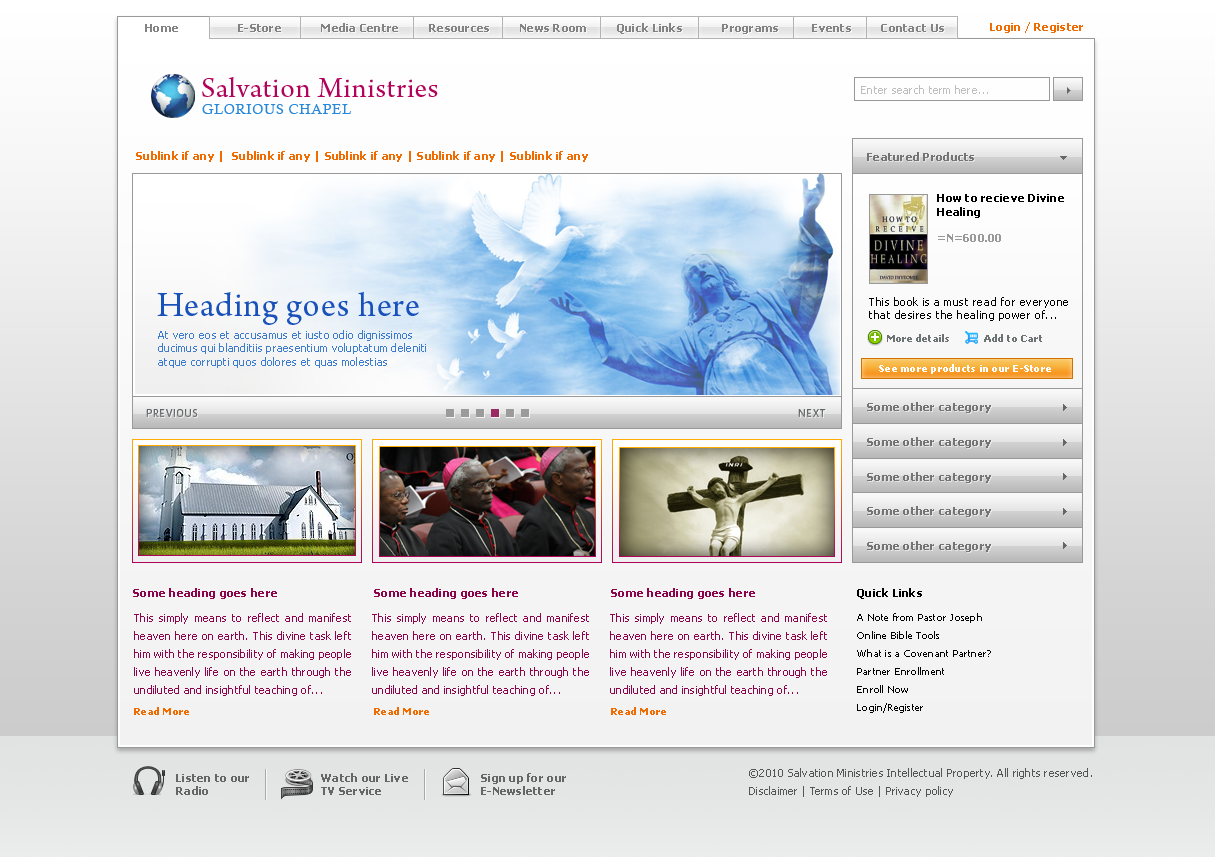
<style>
.page{position:relative;width:1215px;height:857px}
.page>*{position:absolute;margin:0}
.t1{font:11px "Tahoma-Bold";letter-spacing:0.025em;color:#838383}
.t2{font:11px "Tahoma-Bold";letter-spacing:0.025em;color:#f06b00}
.t3{font:30px "ArnoPro-Regular";letter-spacing:0.025em;color:#b1035b}
.t4{font:11px "Tahoma";letter-spacing:0.025em;color:#bebebe}
.t5{font:14px "CalistoMT";letter-spacing:0.05em;color:#2888d9}
.t6{font:11px "Tahoma-Bold";letter-spacing:0.025em;color:#747474}
.t7{font:11px "Tahoma-Bold";letter-spacing:0.025em;color:#000000}
.t8{font:11px "Tahoma-Bold";letter-spacing:0.025em;color:#999999}
.t9{font:36px "ArnoPro-Regular";letter-spacing:0.025em;color:#1951ba}
.t10{font:11px "Tahoma";letter-spacing:0.05em;color:#000000}
.t11{font:11px "Tahoma";letter-spacing:0.025em;color:#3c7bce}
.t12{font:10px "Tahoma-Bold";letter-spacing:0.01em;color:#6d7373}
.t13{font:10px "Tahoma-Bold";letter-spacing:0.025em;color:#ffffff}
.t14{font:11px "Anivers-Regular";letter-spacing:0.05em;color:#6b6d6e}
.t15{font:11px "Anivers-Regular";letter-spacing:0.05em;color:#6d6f70}
.t16{font:11px "Tahoma-Bold";letter-spacing:0.025em;color:#8c0449}
.t17{font:11px/18px "Tahoma";letter-spacing:0.025em;color:#8c0449}
.t18{font:10px/18px "Tahoma";letter-spacing:0.025em;color:#000000}
.t19{font:10px "Tahoma-Bold";letter-spacing:0.025em;color:#f06b00}
.t20{font:11px "Tahoma-Bold";letter-spacing:0.025em;color:#666666}
.t21{font:11px/18px "Tahoma";letter-spacing:0.025em;color:#555555}
</style>
<div class="page">
<p class="t1" style="left:145px;top:23px;width:799px;height:11px">Home                  E-Store            Media Centre         Resources         News Room         Quick Links            Programs          Events         Contact Us</p>
<p class="t2" style="left:990px;top:22px;width:93px;height:11px">Login / Register</p>
<p class="t3" style="left:202px;top:77px;width:236px;height:20px">Salvation Ministries</p>
<p class="t4" style="left:861px;top:85px;width:127px;height:9px">Enter search term here...</p>
<p class="t5" style="left:202px;top:104px;width:150px;height:10px">GLORIOUS CHAPEL</p>
<p class="t2" style="left:136px;top:151px;width:452px;height:11px">Sublink if any |  Sublink if any | Sublink if any | Sublink if any | Sublink if any</p>
<p class="t6" style="left:867px;top:152px;width:107px;height:9px">Featured Products</p>
<p class="t7" style="left:937px;top:194px;width:127px;height:48px">How to recieve Divine Healing<br><br><span class="t8">=N=600.00</span></p>
<p class="t9" style="left:157px;top:291px;width:262px;height:34px">Heading goes here</p>
<p class="t10" style="left:869px;top:297px;width:199px;height:24px">This book is a must read for everyone that desires the healing power of...</p>
<p class="t11" style="left:158px;top:330px;width:268px;height:38px">At vero eos et accusamus et iusto odio dignissimos ducimus qui blanditiis praesentium voluptatum deleniti atque corrupti quos dolores et quas molestias</p>
<p class="t12" style="left:887px;top:334px;width:155px;height:8px">More details           Add to Cart</p>
<p class="t13" style="left:879px;top:364px;width:172px;height:10px">See more products in our E-Store</p>
<p class="t14" style="left:146px;top:409px;width:52px;height:8px">PREVIOUS</p>
<p class="t15" style="left:798px;top:409px;width:28px;height:8px">NEXT</p>
<p class="t6" style="left:867px;top:402px;width:124px;height:11px">Some other category</p>
<p class="t6" style="left:867px;top:437px;width:124px;height:11px">Some other category</p>
<p class="t6" style="left:867px;top:472px;width:124px;height:11px">Some other category</p>
<p class="t6" style="left:867px;top:506px;width:124px;height:11px">Some other category</p>
<p class="t6" style="left:867px;top:541px;width:124px;height:11px">Some other category</p>
<p class="t16" style="left:133px;top:588px;width:144px;height:11px">Some heading goes here</p>
<p class="t16" style="left:374px;top:588px;width:144px;height:11px">Some heading goes here</p>
<p class="t16" style="left:611px;top:588px;width:144px;height:11px">Some heading goes here</p>
<p class="t7" style="left:857px;top:588px;width:65px;height:11px">Quick Links</p>
<p class="t17" style="left:134px;top:613px;width:217px;height:83px;text-align:justify">This simply means to reflect and manifest heaven here on earth. This divine task left him with the responsibility of making people live heavenly life on the earth through the undiluted and insightful teaching of...</p>
<p class="t17" style="left:372px;top:613px;width:217px;height:83px;text-align:justify">This simply means to reflect and manifest heaven here on earth. This divine task left him with the responsibility of making people live heavenly life on the earth through the undiluted and insightful teaching of...</p>
<p class="t17" style="left:610px;top:613px;width:217px;height:83px;text-align:justify">This simply means to reflect and manifest heaven here on earth. This divine task left him with the responsibility of making people live heavenly life on the earth through the undiluted and insightful teaching of...</p>
<p class="t18" style="left:857px;top:613px;width:134px;height:100px">A Note from Pastor Joseph<br>Online Bible Tools<br>What is a Covenant Partner?<br>Partner Enrollment<br>Enroll Now<br>Login/Register</p>
<p class="t19" style="left:134px;top:707px;width:55px;height:8px">Read More</p>
<p class="t19" style="left:374px;top:707px;width:55px;height:8px">Read More</p>
<p class="t19" style="left:611px;top:707px;width:55px;height:8px">Read More</p>
<p class="t20" style="left:176px;top:774px;width:73px;height:21px">Listen to our<br>Radio</p>
<p class="t20" style="left:321px;top:773px;width:87px;height:22px">Watch our Live<br>TV Service</p>
<p class="t20" style="left:481px;top:773px;width:85px;height:22px">Sign up for our<br>E-Newsletter</p>
<p class="t21" style="left:749px;top:768px;width:343px;height:29px">©2010 Salvation Ministries Intellectual Property. All rights reserved. <br>Disclaimer | Terms of Use | Privacy policy</p>
</div>
